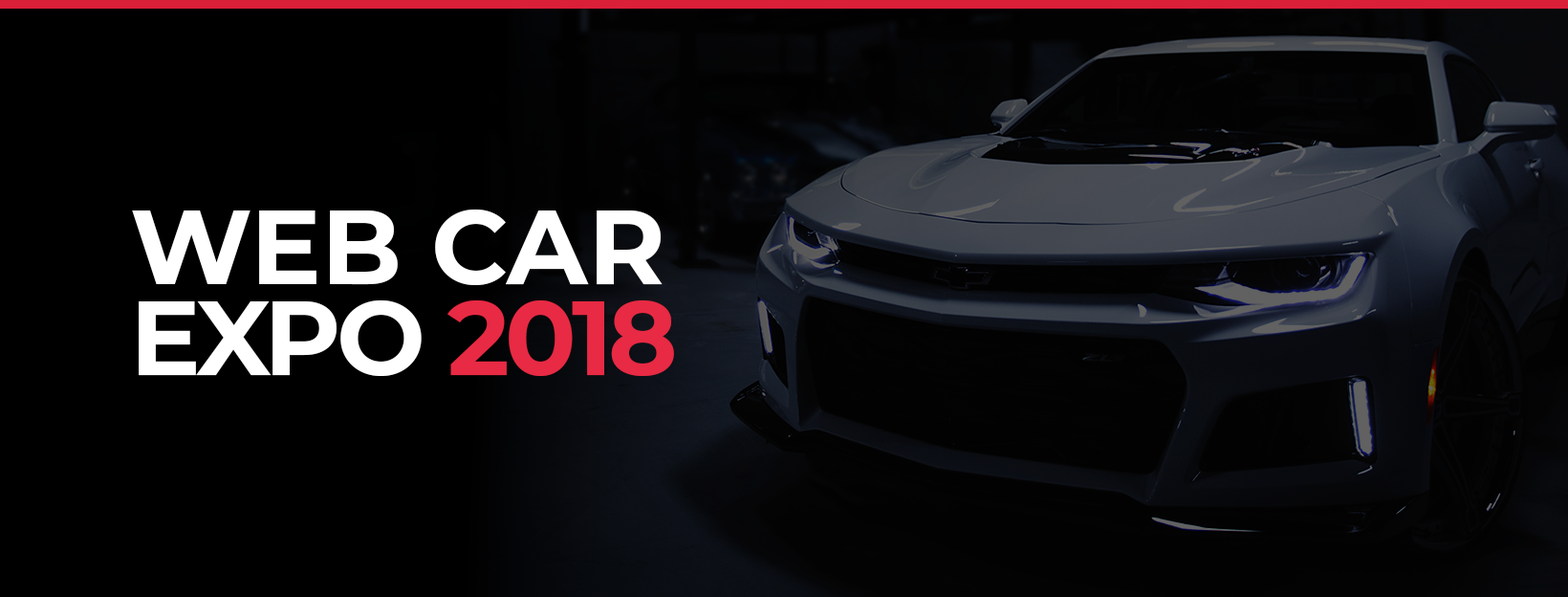
<style>
.page{position:relative;width:1568px;height:597px;background:#000000}
.page>*{position:absolute;margin:0}
.t1{font:105.2px/90.8px "Montserrat-Bold";color:#ffffff;text-transform:uppercase}
.t2{font:105.2px/90.8px "Montserrat-Bold";letter-spacing:-0.04em;color:#ffffff}
.t3{font:105.2px/90.8px "Montserrat-Bold";letter-spacing:-0.04em;color:#e82a44}
</style>
<div class="page">
<p class="t1" style="left:132px;top:209px;width:542px;height:167px">web car<br><span class="t2">EXPO </span><span class="t3">2018</span></p>
</div>
